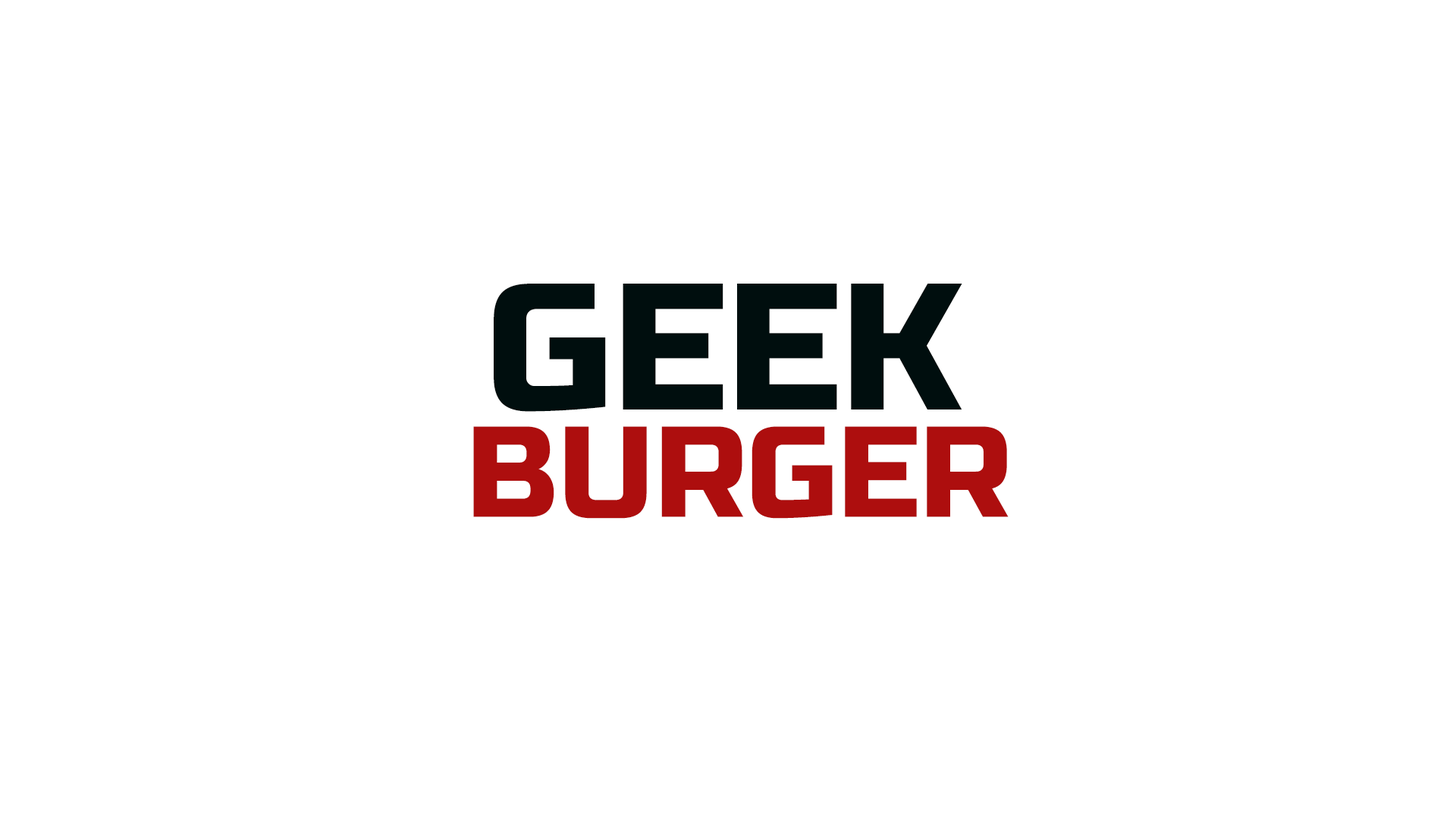
<style>
.page{position:relative;width:1456px;height:819px;background:#ffffff}
.page>*{position:absolute;margin:0}
.t1{font:179.6px "RussoOne-Regular";color:#000e0e}
.t2{font:128.9px "RussoOne-Regular";color:#ad0e0e}
</style>
<div class="page">
<p class="t1" style="left:494px;top:284px;width:468px;height:128px">GEEK</p>
<p class="t2" style="left:473px;top:426px;width:536px;height:93px">BURGER</p>
</div>
